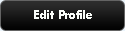
<style>
.page{position:relative;width:125px;height:31px}
.page>*{position:absolute;margin:0}
.t1{font:14px "TwCenMT-Bold";color:#fbfefa}
</style>
<div class="page">
<p class="t1" style="left:34px;top:10px;width:58px;height:9px">Edit Profile</p>
</div>
